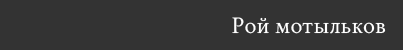
<style>
.page{position:relative;width:403px;height:50px;background:#333333}
.page>*{position:absolute;margin:0}
.t1{font:24px "CrimsonText-Regular";color:#ffffff}
</style>
<div class="page">
<p class="t1" style="left:232px;top:17px;width:154px;height:17px">Рой мотыльков</p>
</div>
